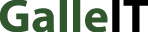
<style>
.page{position:relative;width:148px;height:32px;background:#ffffff}
.page>*{position:absolute;margin:0}
.t1{font:48px "MyriadPro-Bold";letter-spacing:0.003em;color:#31572e}
.t2{font:48px "MyriadPro-Bold";letter-spacing:0.003em;color:#000000}
</style>
<div class="page">
<p class="t1" style="left:0px;top:0px;width:149px;height:33px">Galle<span class="t2">IT</span></p>
</div>
